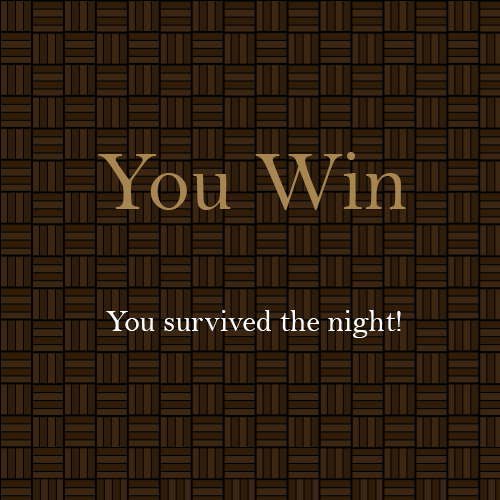
<style>
.page{position:relative;width:500px;height:500px;background:#2f1c09}
.page>*{position:absolute;margin:0}
.t1{font:85px "BellMT";color:#a88652}
.t2{font:31px "BellMT";color:#ffffff}
</style>
<div class="page">
<p class="t1" style="left:98px;top:152px;width:308px;height:58px">You Win</p>
<p class="t2" style="left:106px;top:310px;width:295px;height:28px">You survived the night!</p>
</div>
